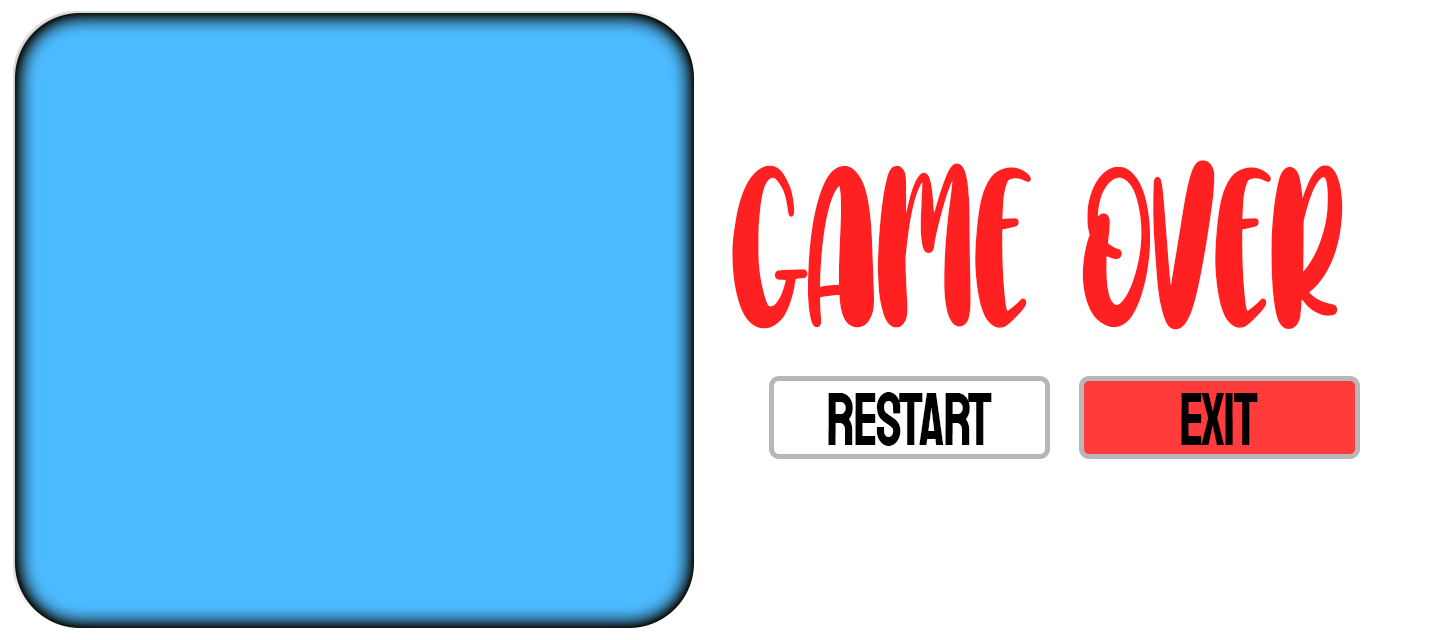
<style>
.page{position:relative;width:1440px;height:640px;background:#ffffff}
.page>*{position:absolute;margin:0}
.t1{font:170.4px "ChocoLetter";letter-spacing:-0.035em;color:#ff2121;scale:0.8 1}
.t2{font:75px "Staatliches-Regular";letter-spacing:-0.035em;color:#000000;scale:0.8 1}
</style>
<div class="page">
<p class="t1" style="left:732px;top:160px;width:611px;height:170px">GAME OVER</p>
<p class="t2" style="left:828px;top:392px;width:164px;height:54px">Restart</p>
<p class="t2" style="left:1181px;top:393px;width:77px;height:52px">Exit</p>
</div>
